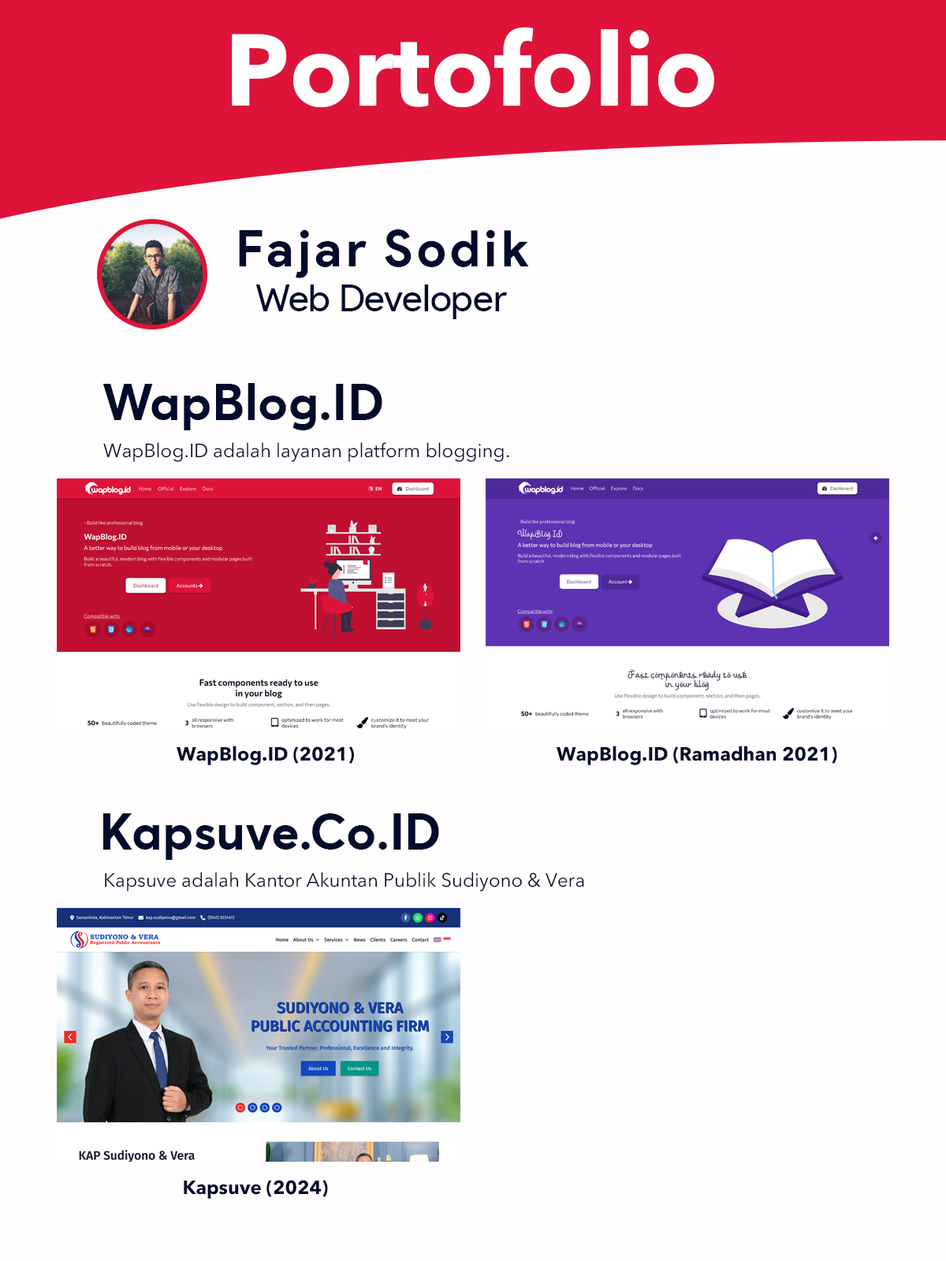
<style>
.page{position:relative;width:946px;height:1261px;background:#fffdfe}
.page>*{position:absolute;margin:0}
.t1{font:100.9px "AvenirNextW1G-Bold";color:#ffffff}
.t2{font:50.4px "ProductSans-Bold";letter-spacing:0.08em;color:#020b2b}
.t3{font:37.8px "ProductSans-Regular";color:#020b2b}
.t4{font:50.4px "Averta-Bold";color:#020b2b}
.t5{font:18.9px "AvenirNextW1G-Regular";color:#020b2b}
.t6{font:18.9px "AvenirNextW1G-Bold";color:#020b2b}
</style>
<div class="page">
<p class="t1" style="left:232px;top:27px;width:482px;height:81px">Portofolio</p>
<p class="t2" style="left:239px;top:229px;width:290px;height:49px">Fajar Sodik</p>
<p class="t3" style="left:255px;top:284px;width:253px;height:35px">Web Developer</p>
<p class="t4" style="left:102px;top:383px;width:280px;height:47px">WapBlog.ID</p>
<p class="t5" style="left:103px;top:442px;width:406px;height:20px">WapBlog.ID adalah layanan platform blogging.</p>
<p class="t6" style="left:177px;top:746px;width:177px;height:19px">WapBlog.ID (2021)</p>
<p class="t6" style="left:556px;top:746px;width:281px;height:19px">WapBlog.ID (Ramadhan 2021)</p>
<p class="t4" style="left:103px;top:813px;width:336px;height:47px">Kapsuve.Co.ID</p>
<p class="t5" style="left:105px;top:872px;width:479px;height:19px">Kapsuve adalah Kantor Akuntan Publik Sudiyono &amp; Vera</p>
<p class="t6" style="left:184px;top:1180px;width:144px;height:19px">Kapsuve (2024)</p>
</div>
